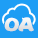
<style>
.page{position:relative;width:38px;height:38px;background:#1e9ef5}
.page>*{position:absolute;margin:0}
.t1{font:17.7px "Jpangtouyu";letter-spacing:-0.03em;color:#e7e7e8;font-weight:bold}
</style>
<div class="page">
<p class="t1" style="left:4px;top:17px;width:30px;height:15px">OA</p>
</div>
